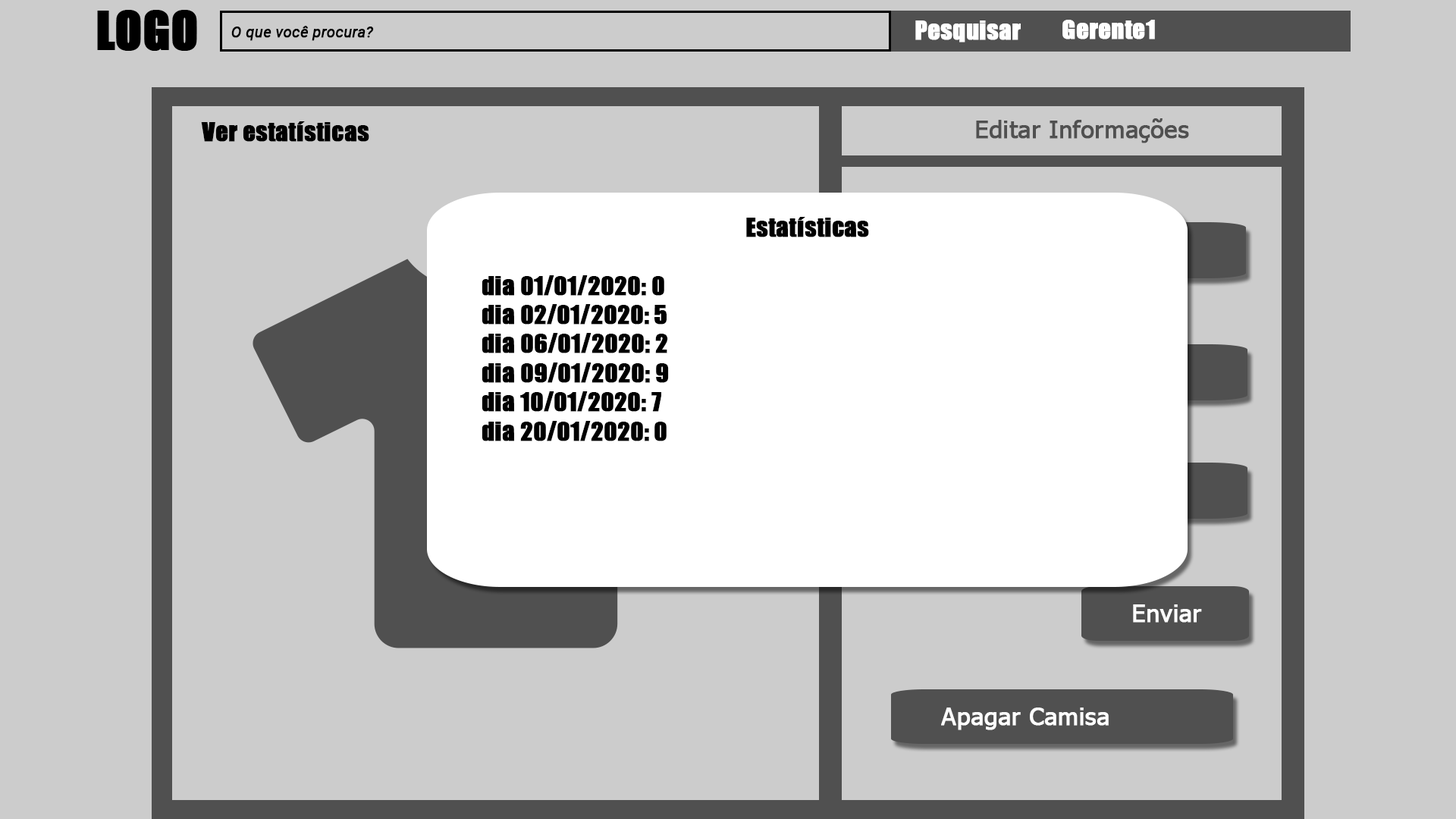
<style>
.page{position:relative;width:1456px;height:819px;background:#cccccc}
.page>*{position:absolute;margin:0}
.t1{font:15.2px "Roboto-Italic";color:#000000;font-weight:bold}
.t2{font:24.3px "Impact";color:#ffffff;font-weight:bold}
.t3{font:24.3px "Impact";color:#000000;font-weight:bold}
.t4{font:24.3px "Tahoma";color:#505050;font-weight:bold}
.t5{font:24.3px "Tahoma";color:#ffffff;font-weight:bold}
</style>
<div class="page">
<p class="t1" style="left:231px;top:26px;width:143px;height:15px">O que você procura?</p>
<p class="t2" style="left:915px;top:20px;width:106px;height:22px">Pesquisar</p>
<p class="t2" style="left:1062px;top:20px;width:93px;height:19px">Gerente1</p>
<p class="t3" style="left:201px;top:121px;width:168px;height:21px">Ver estatísticas</p>
<p class="t4" style="left:976px;top:118px;width:213px;height:25px">Editar Informações</p>
<p class="t3" style="left:482px;top:217px;width:387px;height:224px;text-align:center">Estatísticas<br><br>  dia 01/01/2020: 0<br>  dia 02/01/2020: 5<br>  dia 06/01/2020: 2<br>  dia 09/01/2020: 9<br>  dia 10/01/2020: 7<br>  dia 20/01/2020: 0</p>
<p class="t5" style="left:1133px;top:604px;width:69px;height:19px">Enviar</p>
<p class="t5" style="left:941px;top:708px;width:168px;height:22px">Apagar Camisa</p>
</div>
